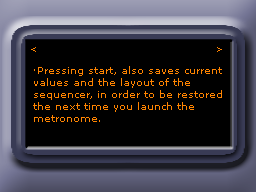
<style>
.page{position:relative;width:256px;height:192px;background:#000000}
.page>*{position:absolute;margin:0}
.t1{font:9px "MSReferenceSansSerif";color:#ff8400}
.t2{font:10px "MSReferenceSansSerif";color:#ff8400}
</style>
<div class="page">
<p class="t1" style="left:31px;top:47px;width:5px;height:5px">&lt;</p>
<p class="t1" style="left:217px;top:47px;width:5px;height:5px">&gt;</p>
<p class="t2" style="left:33px;top:66px;width:189px;height:56px">·Pressing start, also saves current<br>values and the layout of the <br>sequencer, in order to be restored<br>the next time you launch the <br>metronome.</p>
</div>
